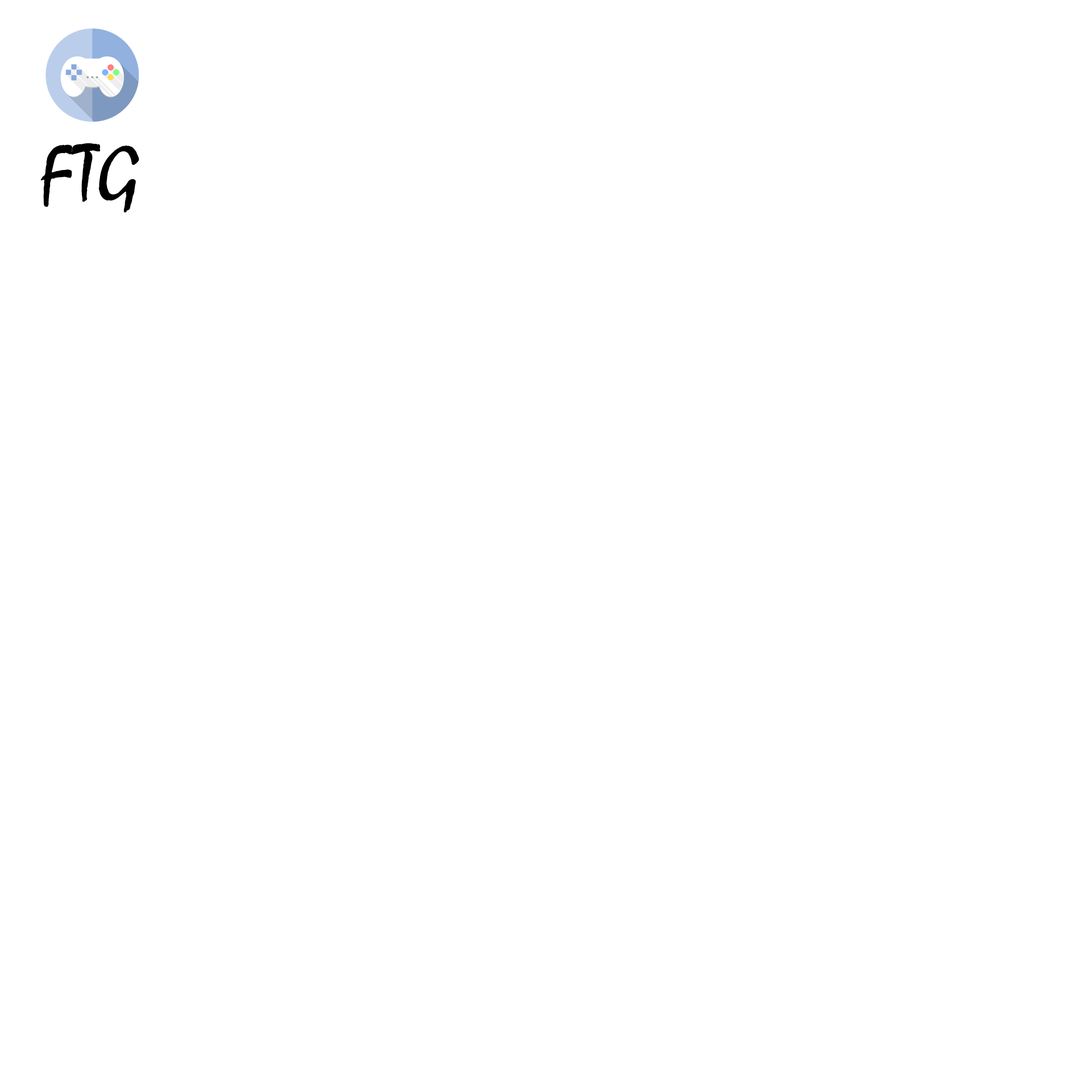
<style>
.page{position:relative;width:1092px;height:1092px;background:#ffffff}
.page>*{position:absolute;margin:0}
.t1{font:82.6px "Mistral";color:#000000}
</style>
<div class="page">
<p class="t1" style="left:40px;top:143px;width:99px;height:70px">FTG</p>
</div>
